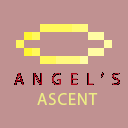
<style>
.page{position:relative;width:128px;height:128px;background:#c09191}
.page>*{position:absolute;margin:0}
.t1{font:16.7px "MyriadPro-Regular";letter-spacing:0.054em;color:#a80115}
.t2{font:16.7px "MyriadPro-Regular";letter-spacing:0.054em;color:#edec84}
</style>
<div class="page">
<p class="t1" style="left:14px;top:73px;width:106px;height:32px;text-align:justify">ANGEL’S <span class="t2">ASCENT</span></p>
</div>
